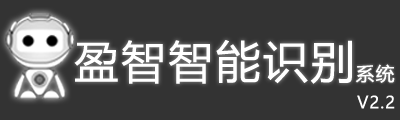
<style>
.page{position:relative;width:400px;height:120px;background:#333333}
.page>*{position:absolute;margin:0}
.t1{font:44.6px "MicrosoftYaHei";letter-spacing:0.06em;color:#ffffff}
.t2{font:18.7px "MicrosoftYaHei";letter-spacing:0.06em;color:#ffffff}
.t3{font:16.7px "MicrosoftYaHei";letter-spacing:0.06em;color:#ffffff}
</style>
<div class="page">
<p class="t1" style="left:74px;top:40px;width:278px;height:44px">盈智智能识别</p>
<p class="t2" style="left:355px;top:64px;width:40px;height:19px">系统</p>
<p class="t3" style="left:357px;top:95px;width:38px;height:14px">V2.2</p>
</div>
